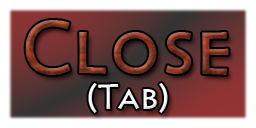
<style>
.page{position:relative;width:256px;height:128px}
.page>*{position:absolute;margin:0}
.t1{font:69px "Pericles"}
.t2{font:33px "Pericles";color:#ffffff}
</style>
<div class="page">
<p class="t1" style="left:25px;top:20px;width:204px;height:55px">Close</p>
<p class="t2" style="left:88px;top:83px;width:80px;height:30px">(Tab)</p>
</div>
